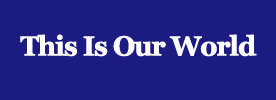
<style>
.page{position:relative;width:276px;height:100px;background:#1b1b82}
.page>*{position:absolute;margin:0}
.t1{font:27px "Georgia-Bold";letter-spacing:-0.06em;color:#ffffff;font-weight:bold}
</style>
<div class="page">
<p class="t1" style="left:20px;top:34px;width:237px;height:23px">This Is Our World</p>
</div>
